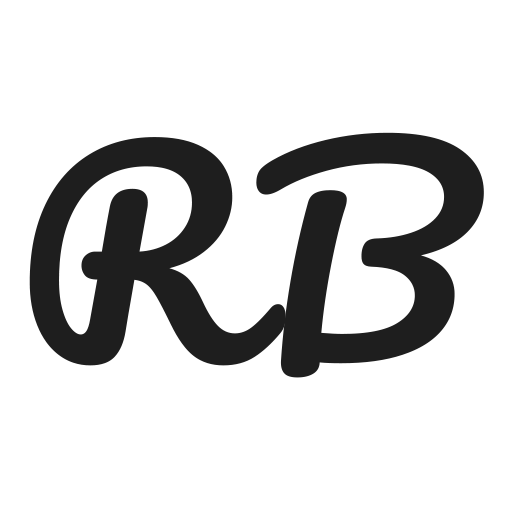
<style>
.page{position:relative;width:512px;height:512px;background:#ffffff}
.page>*{position:absolute;margin:0}
.t1{font:268.2px "Pacifico-Regular";color:#1e1e1e}
</style>
<div class="page">
<p class="t1" style="left:29px;top:132px;width:455px;height:246px">RB</p>
</div>
